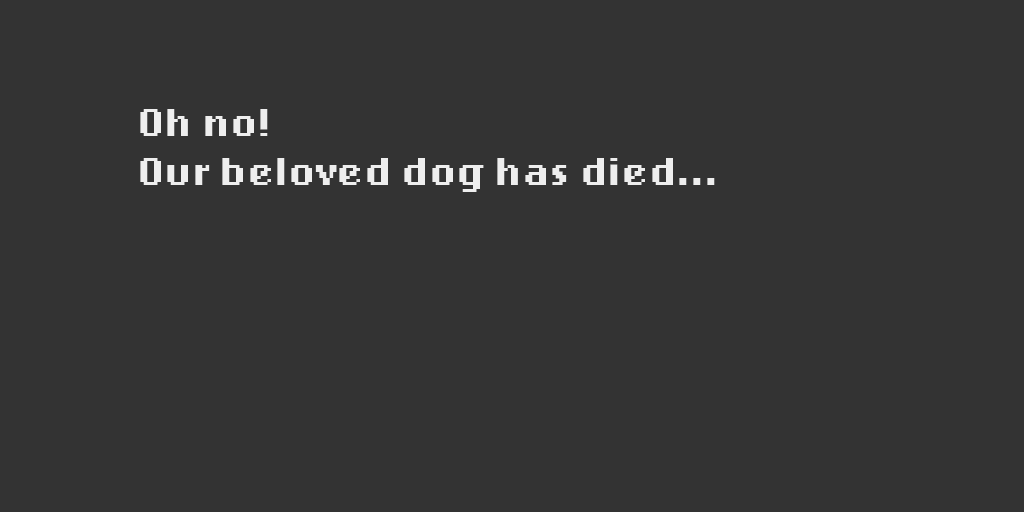
<style>
.page{position:relative;width:1024px;height:512px;background:#333333}
.page>*{position:absolute;margin:0}
.t1{font:41.2px "LoRes12OT-Bold";color:#eeeeee}
</style>
<div class="page">
<p class="t1" style="left:140px;top:109px;width:575px;height:83px">Oh no!<br>Our beloved dog has died...</p>
</div>
